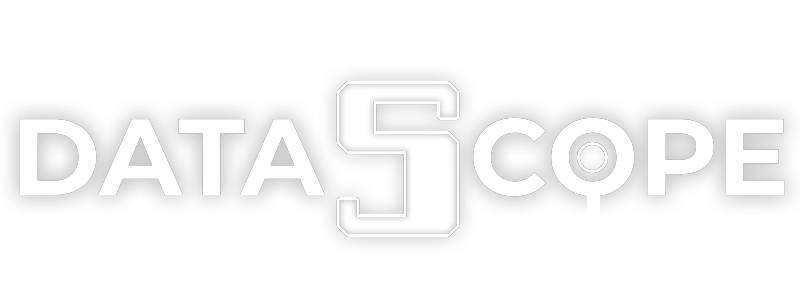
<style>
.page{position:relative;width:800px;height:300px;background:#ffffff}
.page>*{position:absolute;margin:0}
.t1{font:108.3px "MontserratRoman-Bold";color:#ffffff;text-transform:uppercase}
</style>
<div class="page">
<p class="t1" style="left:19px;top:117px;width:766px;height:80px">Data   cope</p>
</div>
